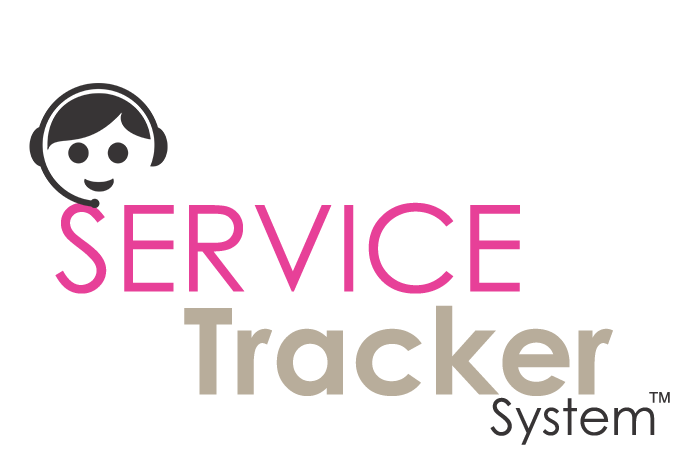
<style>
.page{position:relative;width:700px;height:450px;background:#ffffff}
.page>*{position:absolute;margin:0}
.t1{font:120px "CenturyGothic";color:#e74098}
.t2{font:120px "CenturyGothic-Bold";color:#b8ad9b}
.t3{font:50px "CenturyGothic";color:#373435}
.t4{font:15px "ArialMT";color:#373435}
</style>
<div class="page">
<p class="t1" style="left:55px;top:202px;width:465px;height:92px">SERVICE</p>
<p class="t2" style="left:184px;top:305px;width:429px;height:91px">Tracker</p>
<p class="t3" style="left:490px;top:397px;width:165px;height:48px">System</p>
<p class="t4" style="left:649px;top:392px;width:21px;height:11px">TM</p>
</div>
